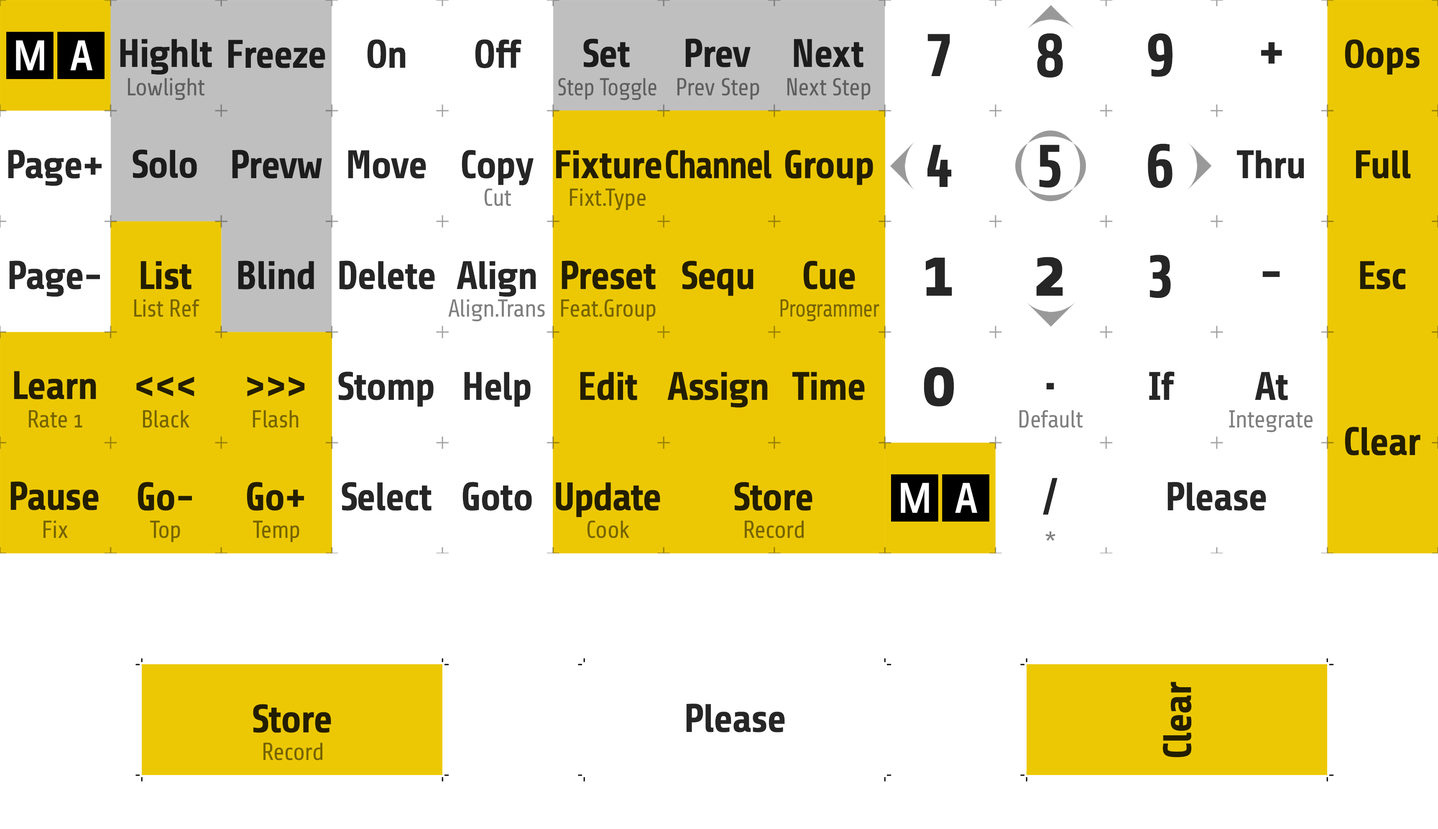
<style>
.page{position:relative;width:1438px;height:829px;background:#ffffff}
.page>*{position:absolute;margin:0}
.t1{font:40px "Share-BoldOSF";letter-spacing:-0.03em;color:#1c1c1c}
.t2{font:40px "Share-BoldOSF";letter-spacing:-0.03em;color:#262626}
.t3{font:61.5px "Share-BoldOSF";letter-spacing:-0.03em;color:#262626}
.t4{font:40px "Share-BoldOSF";letter-spacing:-0.03em;color:#231e01}
.t5{font:49.2px "Share-BoldOSF";letter-spacing:-0.03em;color:#262626}
.t6{font:24.6px "Share-RegularOSF";letter-spacing:-0.03em;color:#5f5f5f}
.t7{font:24.6px "Share-RegularOSF";letter-spacing:-0.03em;color:#5f5f5f;scale:0.95 1}
.t8{font:40px "Share-BoldOSF";letter-spacing:-0.047em;color:#231e01;scale:0.9 1}
.t9{font:24.6px "Share-RegularOSF";letter-spacing:-0.03em;color:#7f7f7f}
.t10{font:24.6px "Share-RegularOSF";letter-spacing:-0.03em;color:#766402}
.t11{font:73.8px "Share-BoldOSF";letter-spacing:-0.03em;color:#262626}
.t12{font:24.6px "Share-RegularOSF";letter-spacing:-0.04em;color:#766402;scale:0.9 1}
.t13{font:40px "Share-BoldOSF";letter-spacing:-0.045em;color:#231e01}
</style>
<div class="page">
<p class="t1" style="left:120px;top:39px;width:92px;height:36px">Highlt</p>
<p class="t1" style="left:228px;top:40px;width:97px;height:28px">Freeze</p>
<p class="t2" style="left:367px;top:39px;width:39px;height:29px">On</p>
<p class="t2" style="left:475px;top:39px;width:47px;height:29px">Off</p>
<p class="t1" style="left:583px;top:38px;width:47px;height:29px">Set</p>
<p class="t1" style="left:686px;top:38px;width:65px;height:29px">Prev</p>
<p class="t1" style="left:794px;top:39px;width:70px;height:28px">Next</p>
<p class="t3" style="left:928px;top:34px;width:22px;height:42px">7</p>
<p class="t3" style="left:1037px;top:33px;width:26px;height:45px">8</p>
<p class="t3" style="left:1148px;top:33px;width:25px;height:44px">9</p>
<p class="t4" style="left:1345px;top:39px;width:75px;height:36px">Oops</p>
<p class="t5" style="left:1261px;top:42px;width:21px;height:22px">+</p>
<p class="t6" style="left:128px;top:78px;width:77px;height:22px">Lowlight</p>
<p class="t7" style="left:558px;top:78px;width:99px;height:22px">Step Toggle</p>
<p class="t6" style="left:678px;top:78px;width:82px;height:22px">Prev Step</p>
<p class="t6" style="left:788px;top:78px;width:83px;height:22px">Next Step</p>
<p class="t2" style="left:8px;top:150px;width:94px;height:36px">Page+</p>
<p class="t1" style="left:133px;top:149px;width:64px;height:29px">Solo</p>
<p class="t1" style="left:232px;top:150px;width:90px;height:29px">Prevw</p>
<p class="t2" style="left:462px;top:150px;width:72px;height:35px">Copy</p>
<p class="t8" style="left:666px;top:150px;width:106px;height:29px">Channel</p>
<p class="t4" style="left:785px;top:150px;width:88px;height:35px">Group</p>
<p class="t3" style="left:928px;top:145px;width:24px;height:42px">4</p>
<p class="t3" style="left:1039px;top:145px;width:22px;height:43px">5</p>
<p class="t3" style="left:1148px;top:143px;width:25px;height:45px">6</p>
<p class="t2" style="left:348px;top:150px;width:78px;height:29px">Move</p>
<p class="t4" style="left:556px;top:150px;width:106px;height:29px">Fixture</p>
<p class="t2" style="left:1237px;top:150px;width:68px;height:29px">Thru</p>
<p class="t4" style="left:1356px;top:150px;width:55px;height:29px">Full</p>
<p class="t9" style="left:484px;top:188px;width:27px;height:18px">Cut</p>
<p class="t10" style="left:570px;top:188px;width:76px;height:22px">Fixt.Type</p>
<p class="t11" style="left:926px;top:258px;width:26px;height:38px">1</p>
<p class="t11" style="left:1036px;top:257px;width:27px;height:39px">2</p>
<p class="t3" style="left:1150px;top:255px;width:21px;height:43px">3</p>
<p class="t2" style="left:9px;top:261px;width:91px;height:36px">Page-</p>
<p class="t4" style="left:141px;top:261px;width:51px;height:28px">List</p>
<p class="t1" style="left:238px;top:261px;width:76px;height:28px">Blind</p>
<p class="t2" style="left:339px;top:261px;width:96px;height:28px">Delete</p>
<p class="t2" style="left:457px;top:261px;width:79px;height:36px">Align</p>
<p class="t4" style="left:562px;top:261px;width:94px;height:28px">Preset</p>
<p class="t4" style="left:682px;top:261px;width:72px;height:35px">Sequ</p>
<p class="t4" style="left:803px;top:261px;width:52px;height:28px">Cue</p>
<p class="t4" style="left:1360px;top:261px;width:46px;height:28px">Esc</p>
<p class="t5" style="left:1263px;top:271px;width:17px;height:6px">-</p>
<p class="t10" style="left:134px;top:299px;width:66px;height:18px">List Ref</p>
<p class="t9" style="left:448px;top:299px;width:97px;height:23px">Align.Trans</p>
<p class="t10" style="left:561px;top:299px;width:95px;height:22px">Feat.Group</p>
<p class="t12" style="left:780px;top:299px;width:100px;height:23px">Programmer</p>
<p class="t4" style="left:14px;top:371px;width:82px;height:28px">Learn</p>
<p class="t4" style="left:136px;top:376px;width:58px;height:21px">&lt;&lt;&lt;</p>
<p class="t4" style="left:247px;top:376px;width:58px;height:21px">&gt;&gt;&gt;</p>
<p class="t2" style="left:338px;top:371px;width:96px;height:36px">Stomp</p>
<p class="t2" style="left:464px;top:372px;width:67px;height:35px">Help</p>
<p class="t4" style="left:580px;top:372px;width:57px;height:28px">Edit</p>
<p class="t4" style="left:668px;top:372px;width:100px;height:36px">Assign</p>
<p class="t4" style="left:793px;top:372px;width:72px;height:28px">Time</p>
<p class="t11" style="left:924px;top:367px;width:30px;height:40px">0</p>
<p class="t2" style="left:1149px;top:371px;width:26px;height:29px">If</p>
<p class="t2" style="left:1255px;top:372px;width:33px;height:28px">At</p>
<p class="t5" style="left:1046px;top:383px;width:8px;height:6px">.</p>
<p class="t10" style="left:29px;top:410px;width:53px;height:18px">Rate 1</p>
<p class="t10" style="left:143px;top:410px;width:47px;height:18px">Black</p>
<p class="t10" style="left:253px;top:410px;width:46px;height:18px">Flash</p>
<p class="t9" style="left:1020px;top:410px;width:63px;height:18px">Default</p>
<p class="t9" style="left:1229px;top:410px;width:84px;height:22px">Integrate</p>
<p class="t4" style="left:1345px;top:427px;width:76px;height:28px">Clear</p>
<p class="t4" style="left:10px;top:481px;width:89px;height:29px">Pause</p>
<p class="t4" style="left:138px;top:482px;width:54px;height:29px">Go-</p>
<p class="t4" style="left:247px;top:482px;width:57px;height:29px">Go+</p>
<p class="t2" style="left:342px;top:482px;width:90px;height:29px">Select</p>
<p class="t2" style="left:463px;top:482px;width:69px;height:29px">Goto</p>
<p class="t13" style="left:556px;top:482px;width:104px;height:35px">Update</p>
<p class="t4" style="left:734px;top:482px;width:79px;height:29px">Store</p>
<p class="t2" style="left:1043px;top:478px;width:15px;height:37px">/</p>
<p class="t2" style="left:1168px;top:482px;width:98px;height:29px">Please</p>
<p class="t10" style="left:43px;top:520px;width:25px;height:18px">Fix</p>
<p class="t10" style="left:150px;top:520px;width:30px;height:22px">Top</p>
<p class="t10" style="left:253px;top:520px;width:46px;height:22px">Temp</p>
<p class="t10" style="left:587px;top:520px;width:43px;height:18px">Cook</p>
<p class="t10" style="left:745px;top:520px;width:59px;height:18px">Record</p>
<p class="t9" style="left:1046px;top:531px;width:10px;height:10px">*</p>
<p class="t4" style="left:1163px;top:682px;width:29px;height:75px;rotate:-90deg">Clear</p>
<p class="t4" style="left:253px;top:704px;width:78px;height:29px">Store</p>
<p class="t2" style="left:686px;top:704px;width:99px;height:28px">Please</p>
<p class="t10" style="left:264px;top:742px;width:58px;height:18px">Record</p>
</div>
